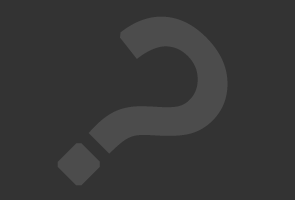
<style>
.page{position:relative;width:295px;height:200px;background:#333333}
.page>*{position:absolute;margin:0}
.t1{font:260px "ArialMT";color:#4c4c4c;font-weight:bold}
</style>
<div class="page">
<p class="t1" style="left:57px;top:16px;width:171px;height:170px;rotate:45deg">?</p>
</div>
